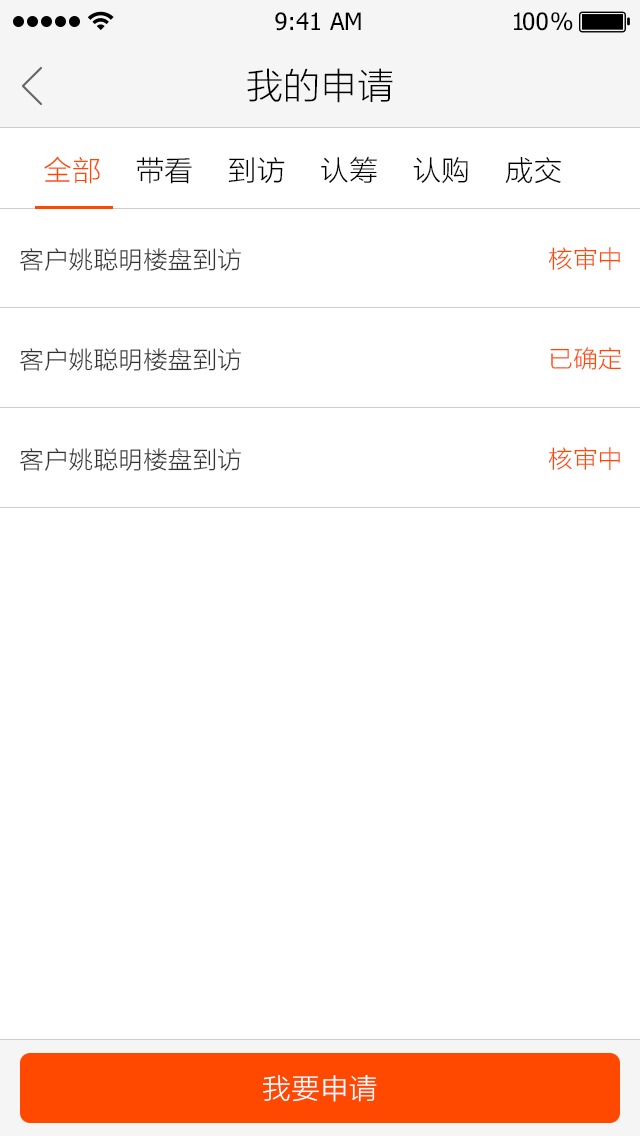
<style>
.page{position:relative;width:640px;height:1136px;background:#ffffff}
.page>*{position:absolute;margin:0}
.t1{font:24px "Tahoma";color:#000000}
.t2{font:24px "Tahoma";letter-spacing:-0.1em;color:#000000}
.t3{font:24px "Tahoma";letter-spacing:-0.25em;color:#000000}
.t4{font:36px "STHeitiSC-Light";color:#000000}
.t5{font:28px "STHeitiSC-Light";color:#000000}
.t6{font:28px "STHeitiSC-Light";color:#ff4800}
.t7{font:24px "STHeitiSC-Light";color:#333333}
.t8{font:24px "STHeitiSC-Light";color:#ff4800}
.t9{font:28px "STHeitiSC-Light";color:#ffffff}
</style>
<div class="page">
<p class="t1" style="left:275px;top:12px;width:86px;height:19px">9:41 AM</p>
<p class="t2" style="left:514px;top:12px;width:59px;height:19px">1<span class="t1">0</span><span class="t3">0 </span>%</p>
<p class="t4" style="left:247px;top:68px;width:146px;height:35px">我的申请</p>
<p class="t5" style="left:44px;top:156px;width:517px;height:28px"><span class="t6">全部</span>    带看    到访    认筹    认购    成交</p>
<p class="t7" style="left:20px;top:248px;width:221px;height:23px">客户姚聪明楼盘到访</p>
<p class="t8" style="left:549px;top:247px;width:71px;height:23px">核审中</p>
<p class="t7" style="left:20px;top:348px;width:221px;height:23px">客户姚聪明楼盘到访</p>
<p class="t8" style="left:550px;top:347px;width:71px;height:23px">已确定</p>
<p class="t7" style="left:20px;top:448px;width:221px;height:23px">客户姚聪明楼盘到访</p>
<p class="t8" style="left:549px;top:447px;width:71px;height:23px">核审中</p>
<p class="t9" style="left:263px;top:1074px;width:114px;height:28px">我要申请</p>
</div>
